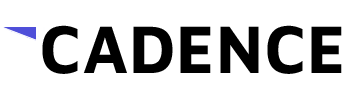
<style>
.page{position:relative;width:350px;height:100px;background:#ffffff}
.page>*{position:absolute;margin:0}
.t1{font:69.2px "MavenPro-Bold";letter-spacing:0.02em;color:#000000;text-transform:uppercase;scale:0.94 1}
</style>
<div class="page">
<p class="t1" style="left:42px;top:25px;width:300px;height:49px">CADENCE</p>
</div>
